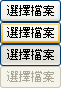
<style>
.page{position:relative;width:61px;height:88px}
.page>*{position:absolute;margin:0}
.t1{font:12px "NSimSun";color:#000000}
.t2{font:12px "NSimSun";color:#aca899}
</style>
<div class="page">
<p class="t1" style="left:7px;top:5px;width:47px;height:11px">選擇檔案</p>
<p class="t1" style="left:7px;top:27px;width:47px;height:11px">選擇檔案</p>
<p class="t1" style="left:7px;top:49px;width:47px;height:11px">選擇檔案</p>
<p class="t2" style="left:7px;top:71px;width:47px;height:11px">選擇檔案</p>
</div>
